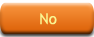
<style>
.page{position:relative;width:94px;height:37px}
.page>*{position:absolute;margin:0}
.t1{font:15px "TrebuchetMS";color:#f9f592}
</style>
<div class="page">
<p class="t1" style="left:40px;top:13px;width:17px;height:12px">No</p>
</div>
